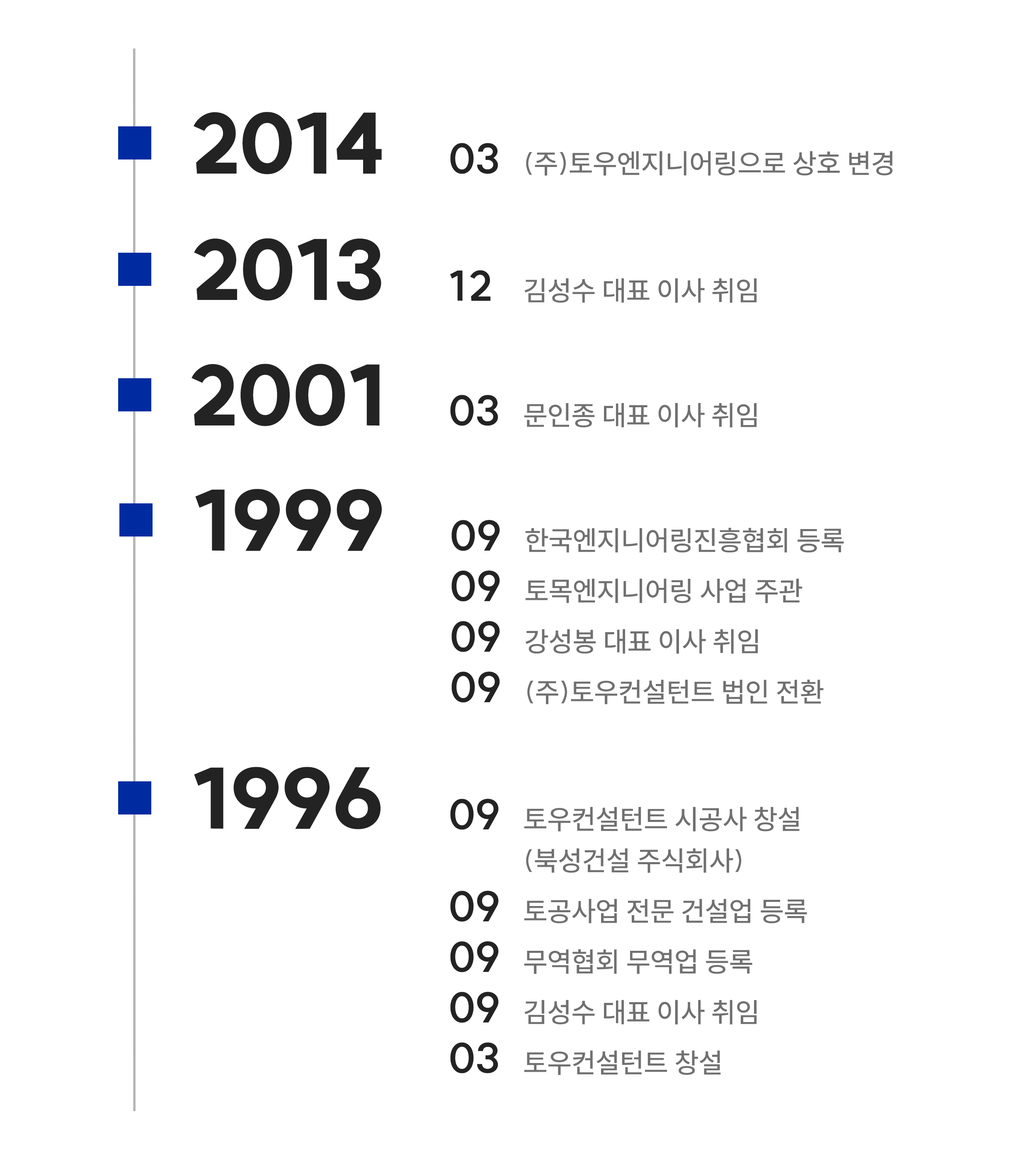
<style>
.page{position:relative;width:1028px;height:1160px;background:#ffffff}
.page>*{position:absolute;margin:0}
.t1{font:82.9px "SUITVariable-Heavy";color:#232323}
.t2{font:27.6px "SUITVariable-Medium";color:#707070}
.t3{font:41.4px "SUITVariable-Bold";color:#232323}
.t4{font:41.4px "SUITVariable-Bold";letter-spacing:0.05em;color:#232323}
.t5{font:27.6px/41.4px "SUITVariable-Medium";color:#707070}
.t6{font:41.4px/41.4px "SUITVariable-Bold";color:#232323}
</style>
<div class="page">
<p class="t1" style="left:194px;top:112px;width:188px;height:62px">2014</p>
<p class="t2" style="left:450px;top:143px;width:442px;height:33px"><span class="t3">03  </span>(주)토우엔지니어링으로 상호 변경</p>
<p class="t1" style="left:194px;top:238px;width:187px;height:63px">2013</p>
<p class="t2" style="left:450px;top:270px;width:307px;height:33px"><span class="t4">12  </span>김성수 대표 이사 취임</p>
<p class="t1" style="left:191px;top:364px;width:189px;height:62px">2001</p>
<p class="t2" style="left:450px;top:395px;width:307px;height:33px"><span class="t3">03  </span>문인종 대표 이사 취임</p>
<p class="t1" style="left:195px;top:489px;width:187px;height:62px">1999</p>
<p class="t2" style="left:451px;top:520px;width:393px;height:33px"><span class="t3">09  </span>한국엔지니어링진흥협회 등록</p>
<p class="t2" style="left:451px;top:571px;width:351px;height:32px"><span class="t3">09  </span>토목엔지니어링 사업 주관</p>
<p class="t2" style="left:451px;top:621px;width:307px;height:33px"><span class="t3">09  </span>강성봉 대표 이사 취임</p>
<p class="t2" style="left:451px;top:672px;width:372px;height:32px"><span class="t3">09  </span>(주)토우컨설턴트 법인 전환</p>
<p class="t1" style="left:194px;top:767px;width:186px;height:63px">1996</p>
<p class="t5" style="left:450px;top:799px;width:349px;height:74px"><span class="t6">09  </span>토우컨설턴트 시공사 창설<br>     (북성건설 주식회사)</p>
<p class="t2" style="left:450px;top:891px;width:357px;height:33px"><span class="t3">09  </span>토공사업 전문 건설업 등록</p>
<p class="t2" style="left:450px;top:942px;width:302px;height:32px"><span class="t3">09  </span>무역협회 무역업 등록</p>
<p class="t2" style="left:450px;top:992px;width:307px;height:33px"><span class="t3">09  </span>김성수 대표 이사 취임</p>
<p class="t2" style="left:450px;top:1043px;width:271px;height:32px"><span class="t3">03  </span>토우컨설턴트 창설</p>
</div>
